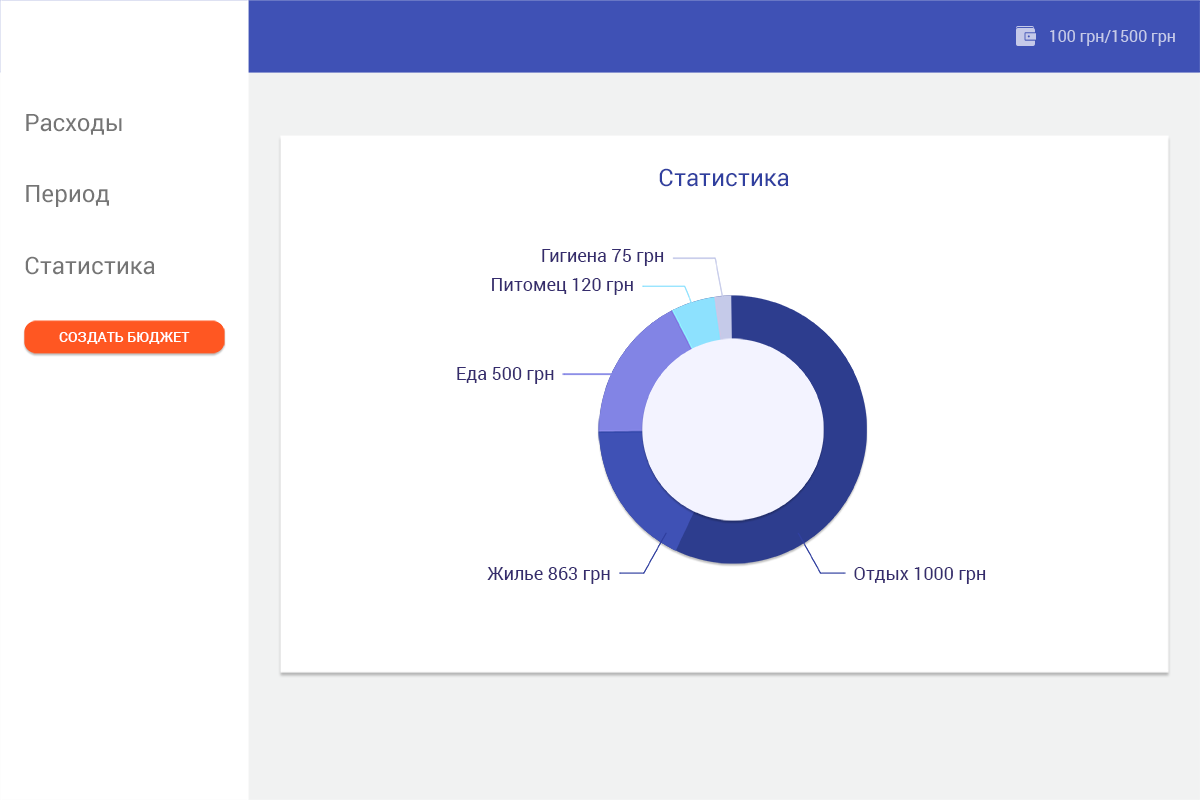
<style>
.page{position:relative;width:1200px;height:800px;background:#ffffff}
.page>*{position:absolute;margin:0}
.t1{font:16px "Roboto-Regular";color:#c5cae9}
.t2{font:24px "Roboto-Regular";color:#757575}
.t3{font:24px "Roboto-Regular";color:#303f9f}
.t4{font:18px "Roboto-Regular";color:#352c6d}
.t5{font:14px "Roboto-Medium";letter-spacing:0.005em;color:#ffffff;text-transform:uppercase}
</style>
<div class="page">
<p class="t1" style="left:1050px;top:30px;width:125px;height:16px">100 грн/1500 грн</p>
<p class="t2" style="left:26px;top:114px;width:96px;height:21px">Расходы</p>
<p class="t3" style="left:659px;top:168px;width:130px;height:19px">Статистика</p>
<p class="t2" style="left:26px;top:185px;width:84px;height:22px">Период</p>
<p class="t2" style="left:25px;top:256px;width:130px;height:19px">Статистика</p>
<p class="t4" style="left:542px;top:249px;width:122px;height:17px">Гигиена 75 грн</p>
<p class="t4" style="left:492px;top:278px;width:141px;height:17px">Питомец 120 грн</p>
<p class="t5" style="left:59px;top:332px;width:131px;height:12px">создать бюджет</p>
<p class="t4" style="left:457px;top:367px;width:97px;height:17px">Еда 500 грн</p>
<p class="t4" style="left:487px;top:567px;width:123px;height:17px">Жилье 863 грн</p>
<p class="t4" style="left:854px;top:567px;width:132px;height:17px">Отдых 1000 грн</p>
</div>
